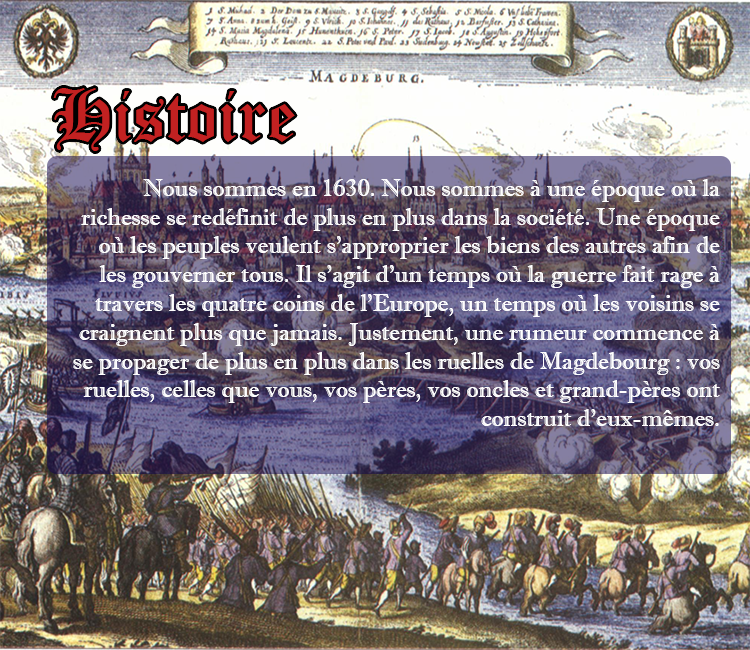
<style>
.page{position:relative;width:750px;height:650px}
.page>*{position:absolute;margin:0}
.t1{font:24px "ImprintMT-Shadow";color:#ffffff}
</style>
<div class="page">
<p class="t1" style="left:73px;top:179px;width:647px;height:247px;text-align:right">Nous sommes en 1630. Nous sommes à une époque où la <br>richesse se redéfinit de plus en plus dans la société. Une époque où les peuples veulent s’approprier les biens des autres afin de les gouverner tous. Il s’agit d’un temps où la guerre fait rage à travers les quatre coins de l’Europe, un temps où les voisins se craignent plus que jamais. Justement, une rumeur commence à se propager de plus en plus dans les ruelles de Magdebourg : vos ruelles, celles que vous, vos pères, vos oncles et grand-pères ont construit d’eux-mêmes.</p>
</div>
